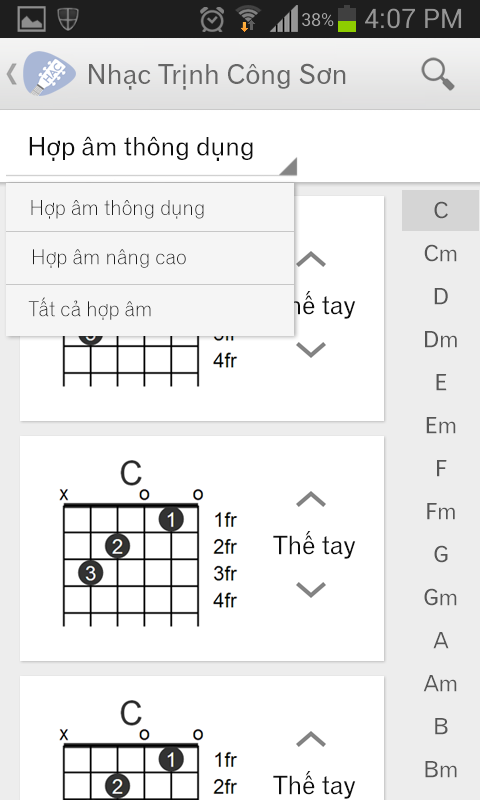
<style>
.page{position:relative;width:480px;height:800px;background:#ffffff}
.page>*{position:absolute;margin:0}
.t1{font:27px "UVNGioMay";color:#666666}
.t2{font:25px "UVNGioMay";color:#0e0e0e}
.t3{font:20px "UVNGioMayNhe";color:#1e1e1e}
.t4{font:22px/43px "UVNGioMay";color:#565656}
.t5{font:25px "UVNGioMay";color:#0f0f0f}
</style>
<div class="page">
<p class="t1" style="left:89px;top:63px;width:257px;height:27px">Nhạc Trịnh Công Sơn</p>
<p class="t2" style="left:29px;top:136px;width:224px;height:25px">Hợp âm thông dụng</p>
<p class="t3" style="left:31px;top:200px;width:173px;height:19px">Hợp âm thông dụng</p>
<p class="t4" style="left:423px;top:201px;width:34px;height:577px;text-align:center">C<br>Cm<br>D<br>Dm<br>E<br>Em<br>F<br>Fm<br>G<br>Gm<br>A<br>Am<br>B<br>Bm</p>
<p class="t3" style="left:33px;top:249px;width:153px;height:19px">Hợp âm nâng cao</p>
<p class="t5" style="left:273px;top:291px;width:83px;height:28px">Thế tay</p>
<p class="t3" style="left:28px;top:297px;width:123px;height:23px">Tất cả hợp âm</p>
<p class="t5" style="left:273px;top:531px;width:83px;height:28px">Thế tay</p>
<p class="t5" style="left:273px;top:771px;width:83px;height:28px">Thế tay</p>
</div>
